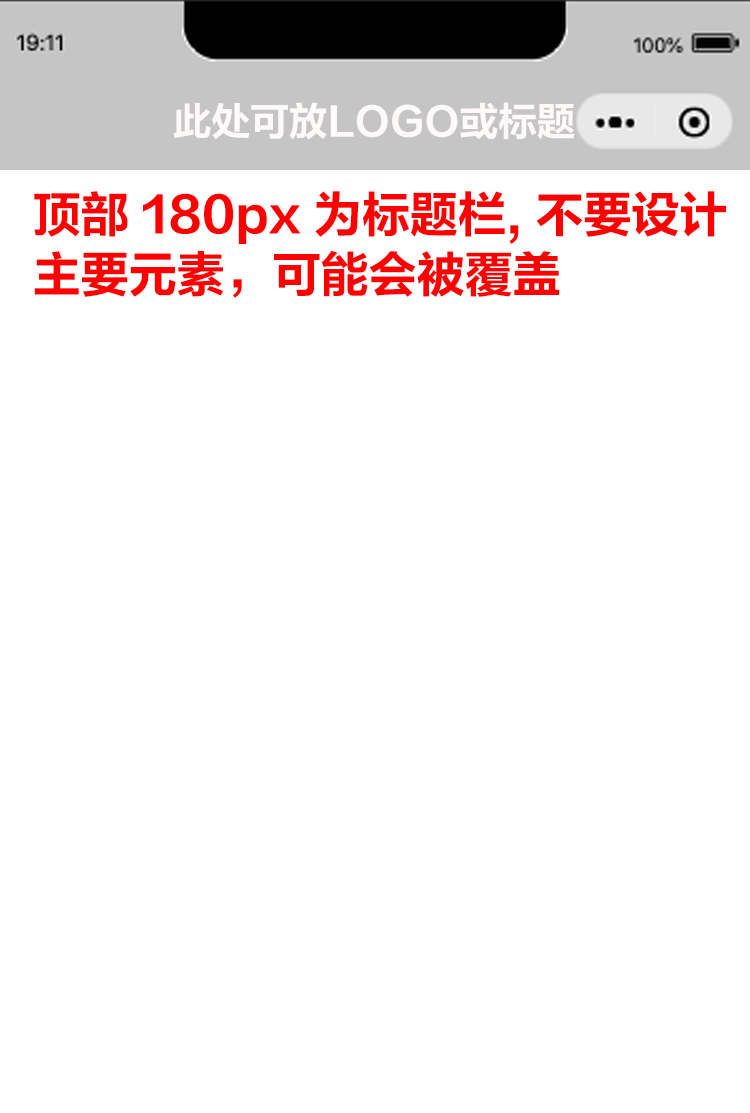
<style>
.page{position:relative;width:750px;height:1113px;background:#ffffff}
.page>*{position:absolute;margin:0}
.t1{font:38.7px "FZLTCHJW--GB1-0";color:#fffafa}
.t2{font:48px/60px "FZLTCHJW--GB1-0";color:#ff0000}
</style>
<div class="page">
<p class="t1" style="left:173px;top:102px;width:402px;height:38px">此处可放LOGO或标题</p>
<p class="t2" style="left:34px;top:191px;width:692px;height:107px">顶部 180px 为标题栏, 不要设计<br>主要元素，可能会被覆盖</p>
</div>
